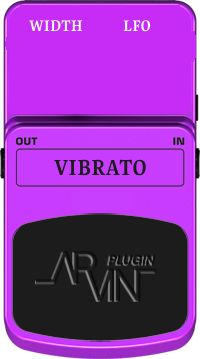
<style>
.page{position:relative;width:200px;height:359px;background:#c72bf6}
.page>*{position:absolute;margin:0}
.t1{font:17px "Gupter-Bold";color:#ffffff}
.t2{font:24px "Gupter-Bold";color:#1c1c1c}
</style>
<div class="page">
<p class="t1" style="left:29px;top:20px;width:54px;height:12px">WIDTH</p>
<p class="t1" style="left:123px;top:20px;width:28px;height:12px">LFO</p>
<p class="t2" style="left:54px;top:159px;width:92px;height:17px">VIBRATO</p>
</div>
